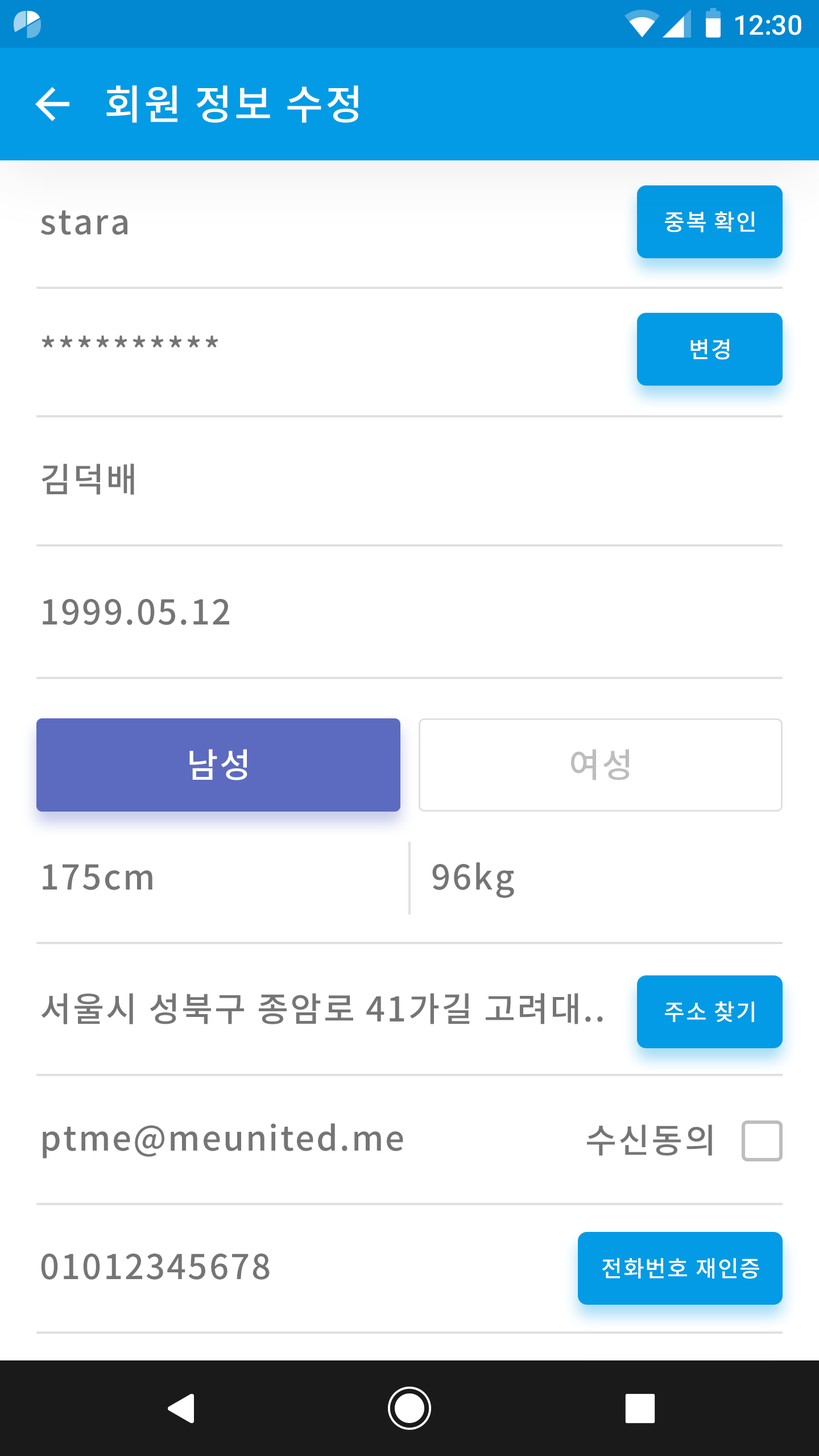
<style>
.page{position:relative;width:819px;height:1456px;background:#ffffff}
.page>*{position:absolute;margin:0}
.t1{font:27.3px "Roboto-Medium";color:#ffffff}
.t2{font:40.9px "NotoSansCJKkr-Medium";letter-spacing:0.05em;color:#ffffff}
.t3{font:34.1px "NotoSansCJKkr-Medium";letter-spacing:0.05em;color:#757575}
.t4{font:22.7px "NotoSansCJKkr-Medium";letter-spacing:0.05em;color:#ffffff}
.t5{font:34.1px "NotoSansCJKkr-Medium";letter-spacing:0.05em;color:#ffffff}
.t6{font:34.1px "NotoSansCJKkr-Medium";letter-spacing:0.05em;color:#bdbdbd}
</style>
<div class="page">
<p class="t1" style="left:735px;top:15px;width:66px;height:20px">12:30</p>
<p class="t2" style="left:106px;top:85px;width:252px;height:38px">회원 정보 수정</p>
<p class="t3" style="left:40px;top:210px;width:87px;height:25px">stara</p>
<p class="t4" style="left:665px;top:211px;width:90px;height:22px">중복 확인</p>
<p class="t3" style="left:42px;top:336px;width:176px;height:12px">**********</p>
<p class="t4" style="left:690px;top:339px;width:40px;height:20px">변경</p>
<p class="t3" style="left:42px;top:464px;width:92px;height:31px">김덕배</p>
<p class="t3" style="left:43px;top:599px;width:186px;height:26px">1999.05.12</p>
<p class="t5" style="left:189px;top:749px;width:58px;height:31px">남성</p>
<p class="t6" style="left:571px;top:749px;width:59px;height:31px">여성</p>
<p class="t3" style="left:43px;top:864px;width:109px;height:26px">175cm</p>
<p class="t3" style="left:432px;top:862px;width:82px;height:36px">96kg</p>
<p class="t3" style="left:41px;top:993px;width:562px;height:31px">서울시 성북구 종암로 41가길 고려대..</p>
<p class="t4" style="left:665px;top:1001px;width:89px;height:21px">주소 찾기</p>
<p class="t3" style="left:43px;top:1123px;width:360px;height:36px">ptme@meunited.me</p>
<p class="t3" style="left:587px;top:1124px;width:125px;height:32px">수신동의</p>
<p class="t3" style="left:41px;top:1254px;width:229px;height:26px">01012345678</p>
<p class="t4" style="left:602px;top:1258px;width:157px;height:21px">전화번호 재인증</p>
</div>
